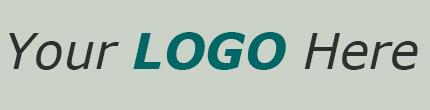
<style>
.page{position:relative;width:430px;height:110px;background:#cbd3c9}
.page>*{position:absolute;margin:0}
.t1{font:50px "Verdana-Italic";color:#2d3030}
.t2{font:50px "Verdana-BoldItalic";color:#006666}
</style>
<div class="page">
<p class="t1" style="left:9px;top:32px;width:409px;height:38px">Your <span class="t2">LOGO </span>Here</p>
</div>
